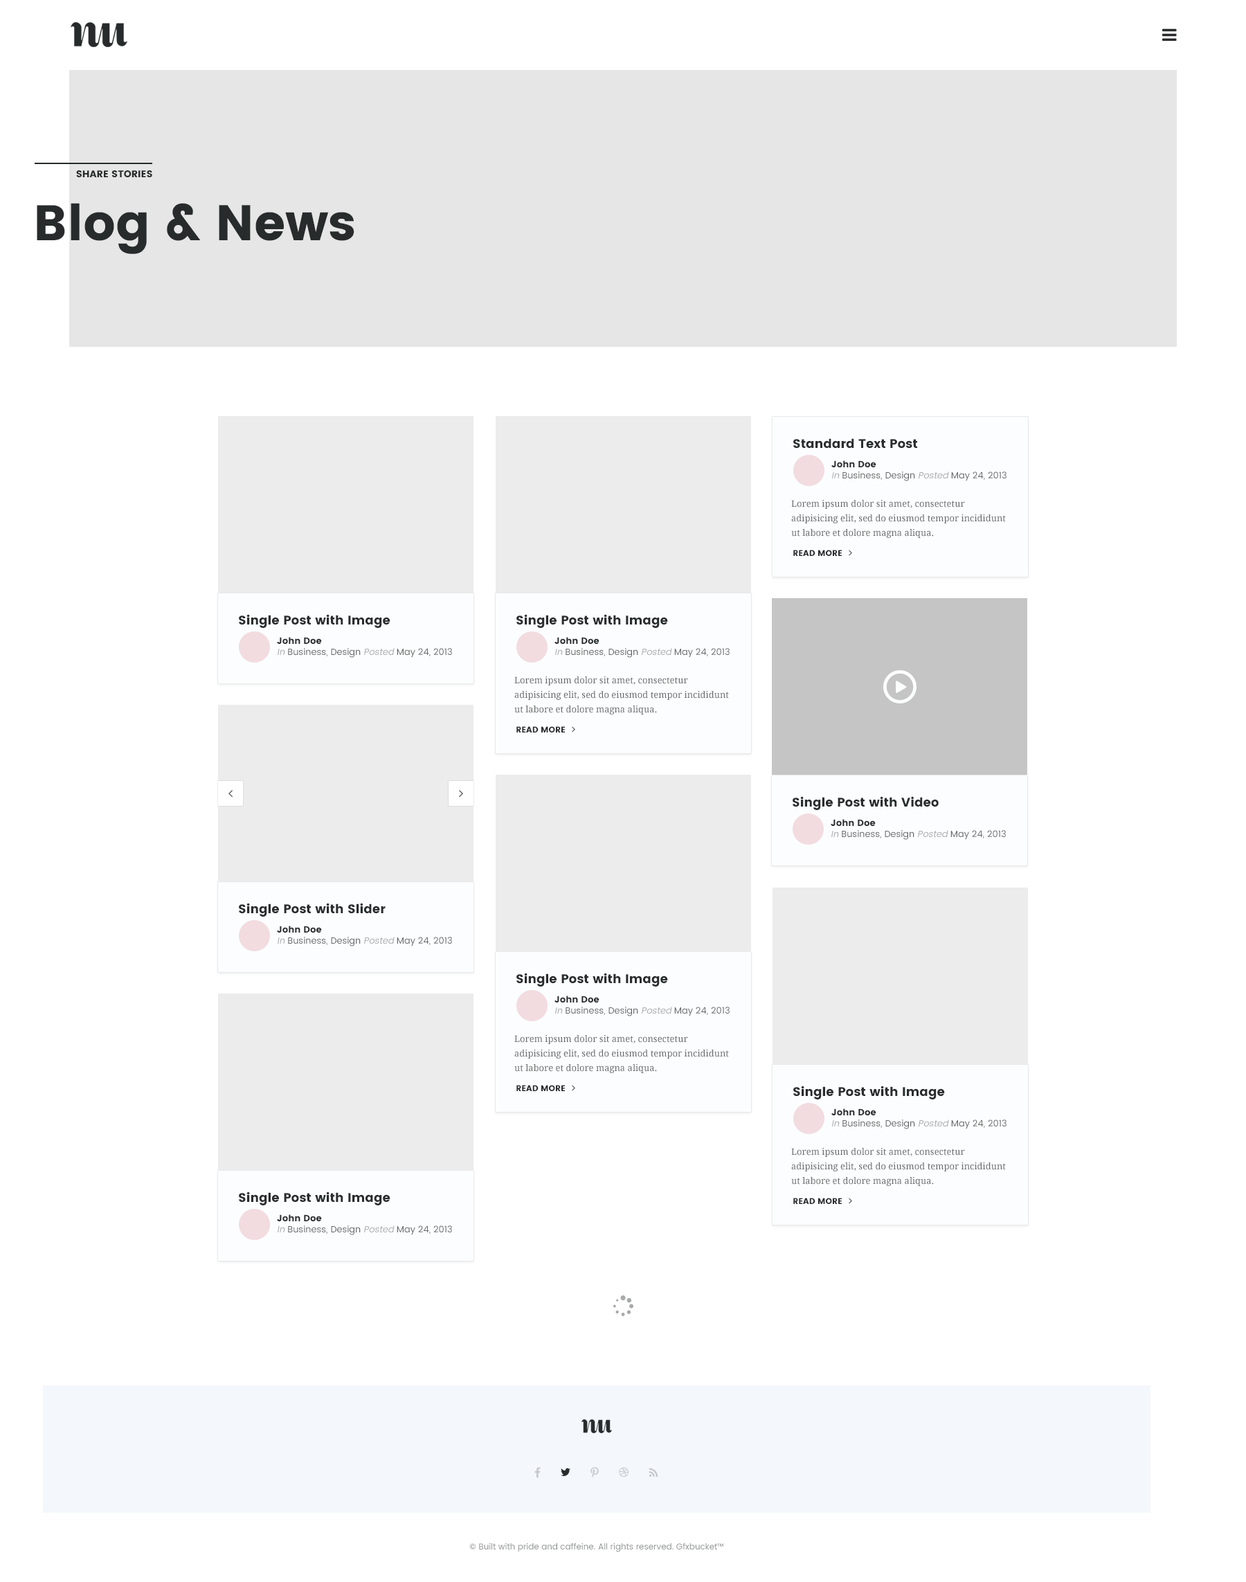
<style>
.page{position:relative;width:1246px;height:1582px;background:#ffffff}
.page>*{position:absolute;margin:0}
.t1{font:9.7px "Poppins";color:#272b2b;text-transform:uppercase}
.t2{font:49.8px "Poppins";color:#272b2b}
.t3{font:12.5px "Poppins";color:#292d2e}
.t4{font:6.9px "Poppins";color:#ffffff;text-transform:uppercase}
.t5{font:9px "Poppins-Regular";color:#676a6a}
.t6{font:9px "Poppins";color:#292d2e}
.t7{font:9px "Poppins-Regular";color:#abaeaf;font-style:italic}
.t8{font:9px/14.4px "DroidSerif";color:#676a6a}
.t9{font:8.3px "Poppins";color:#272b2b;text-transform:uppercase}
.t10{font:8.3px "Poppins-Regular";color:#949696}
</style>
<div class="page">
<p class="t1" style="left:76px;top:170px;width:76px;height:7px">share stories</p>
<p class="t2" style="left:37px;top:203px;width:317px;height:51px">Blog &amp; News</p>
<p class="t3" style="left:793px;top:438px;width:124px;height:11px"><span class="t4"><br></span>Standard Text Post</p>
<p class="t5" style="left:831px;top:460px;width:176px;height:21px"><span class="t6">John Doe<br></span><span class="t7">In </span>Business, Design <span class="t7">Posted </span>May 24, 2013</p>
<p class="t8" style="left:791px;top:500px;width:215px;height:38px">Lorem ipsum dolor sit amet, consectetur adipisicing elit, sed do eiusmod tempor incididunt ut labore et dolore magna aliqua.</p>
<p class="t9" style="left:793px;top:550px;width:49px;height:6px">Read More</p>
<p class="t3" style="left:239px;top:614px;width:151px;height:14px"><span class="t4"><br></span>Single Post with Image</p>
<p class="t3" style="left:516px;top:614px;width:152px;height:14px"><span class="t4"><br></span>Single Post with Image</p>
<p class="t5" style="left:277px;top:637px;width:175px;height:21px"><span class="t6">John Doe<br></span><span class="t7">In </span>Business, Design <span class="t7">Posted </span>May 24, 2013</p>
<p class="t5" style="left:555px;top:637px;width:175px;height:21px"><span class="t6">John Doe<br></span><span class="t7">In </span>Business, Design <span class="t7">Posted </span>May 24, 2013</p>
<p class="t8" style="left:514px;top:676px;width:215px;height:38px">Lorem ipsum dolor sit amet, consectetur adipisicing elit, sed do eiusmod tempor incididunt ut labore et dolore magna aliqua.</p>
<p class="t9" style="left:516px;top:726px;width:49px;height:6px">Read More</p>
<p class="t3" style="left:793px;top:796px;width:146px;height:14px"><span class="t4"><br></span>Single Post with Video</p>
<p class="t5" style="left:831px;top:819px;width:175px;height:21px"><span class="t6">John Doe<br></span><span class="t7">In </span>Business, Design <span class="t7">Posted </span>May 24, 2013</p>
<p class="t3" style="left:239px;top:903px;width:147px;height:14px"><span class="t4"><br></span>Single Post with Slider</p>
<p class="t5" style="left:277px;top:926px;width:175px;height:20px"><span class="t6">John Doe<br></span><span class="t7">In </span>Business, Design <span class="t7">Posted </span>May 24, 2013</p>
<p class="t3" style="left:516px;top:973px;width:152px;height:14px"><span class="t4"><br></span>Single Post with Image</p>
<p class="t5" style="left:555px;top:996px;width:175px;height:20px"><span class="t6">John Doe<br></span><span class="t7">In </span>Business, Design <span class="t7">Posted </span>May 24, 2013</p>
<p class="t8" style="left:514px;top:1035px;width:215px;height:38px">Lorem ipsum dolor sit amet, consectetur adipisicing elit, sed do eiusmod tempor incididunt ut labore et dolore magna aliqua.</p>
<p class="t9" style="left:516px;top:1085px;width:49px;height:6px">Read More</p>
<p class="t3" style="left:793px;top:1086px;width:152px;height:13px"><span class="t4"><br></span>Single Post with Image</p>
<p class="t5" style="left:831px;top:1108px;width:176px;height:21px"><span class="t6">John Doe<br></span><span class="t7">In </span>Business, Design <span class="t7">Posted </span>May 24, 2013</p>
<p class="t8" style="left:791px;top:1148px;width:215px;height:38px">Lorem ipsum dolor sit amet, consectetur adipisicing elit, sed do eiusmod tempor incididunt ut labore et dolore magna aliqua.</p>
<p class="t3" style="left:239px;top:1191px;width:151px;height:14px"><span class="t4"><br></span>Single Post with Image</p>
<p class="t9" style="left:793px;top:1198px;width:49px;height:6px">Read More</p>
<p class="t5" style="left:277px;top:1214px;width:175px;height:21px"><span class="t6">John Doe<br></span><span class="t7">In </span>Business, Design <span class="t7">Posted </span>May 24, 2013</p>
<p class="t10" style="left:469px;top:1542px;width:254px;height:10px">© Built with pride and caffeine. All rights reserved. Gfxbucket™</p>
</div>
